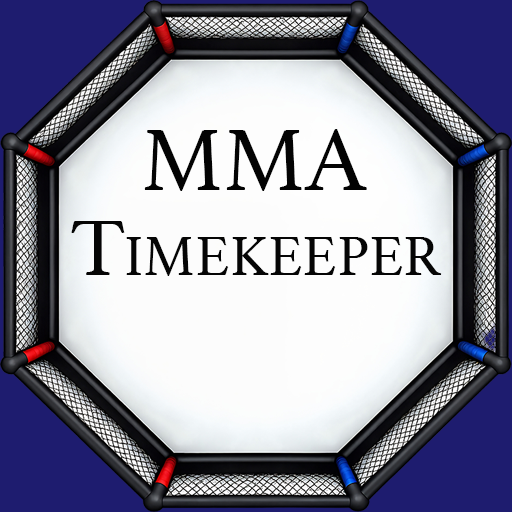
<style>
.page{position:relative;width:512px;height:512px}
.page>*{position:absolute;margin:0}
.t1{font:91.6px "Athelas-Regular";letter-spacing:-0.01em;color:#030303;font-variant:small-caps}
.t2{font:83.1px "Athelas-Regular";letter-spacing:-0.01em;color:#050505;font-variant:small-caps}
</style>
<div class="page">
<p class="t1" style="left:144px;top:129px;width:223px;height:62px">MMA</p>
<p class="t2" style="left:71px;top:221px;width:371px;height:55px">Timekeeper</p>
</div>
